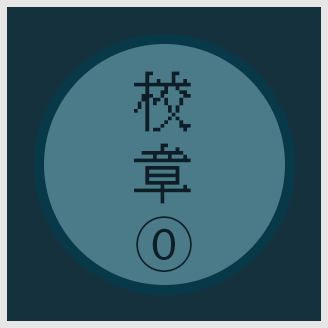
<style>
.page{position:relative;width:328px;height:328px;background:#16313e}
.page>*{position:absolute;margin:0}
.t1{font:60px "KH-Dot-kagurazaka-16";letter-spacing:0.12em;color:#0a192d}
.t2{font:60px "KozGoPr6N-Regular";letter-spacing:0.12em;color:#0a192d}
</style>
<div class="page">
<p class="t1" style="left:134px;top:71px;width:58px;height:201px;text-align:center">校章<br><span class="t2">⓪</span></p>
</div>
